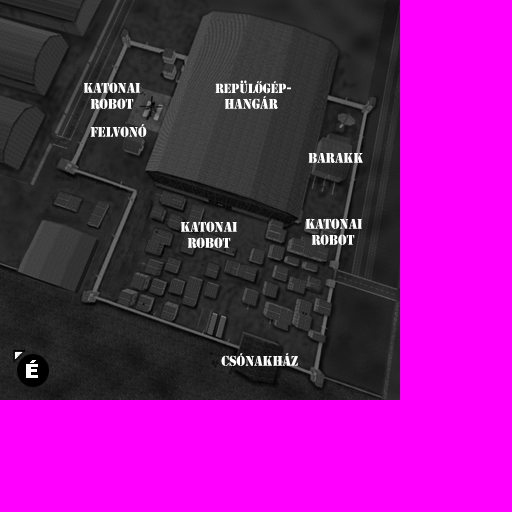
<style>
.page{position:relative;width:512px;height:512px;background:#ff00ff}
.page>*{position:absolute;margin:0}
.t1{font:13.2px "StencilStd";letter-spacing:-0.005em;color:#ffffff;scale:0.92 1}
.t2{font:12.4px "StencilStd";letter-spacing:-0.005em;color:#ffffff;scale:0.92 1}
</style>
<div class="page">
<p class="t1" style="left:84px;top:82px;width:56px;height:11px">KATONAI</p>
<p class="t2" style="left:215px;top:80px;width:76px;height:14px">REPÜLŐGÉP-</p>
<p class="t1" style="left:90px;top:98px;width:44px;height:11px">ROBOT</p>
<p class="t1" style="left:225px;top:96px;width:53px;height:13px">HANGÁR</p>
<p class="t1" style="left:90px;top:124px;width:57px;height:13px">FELVONÓ</p>
<p class="t1" style="left:308px;top:153px;width:55px;height:10px">BARAKK</p>
<p class="t1" style="left:181px;top:221px;width:56px;height:11px">KATONAI</p>
<p class="t1" style="left:306px;top:218px;width:56px;height:11px">KATONAI</p>
<p class="t1" style="left:187px;top:237px;width:44px;height:11px">ROBOT</p>
<p class="t1" style="left:311px;top:234px;width:44px;height:11px">ROBOT</p>
<p class="t1" style="left:221px;top:353px;width:77px;height:13px">CSÓNAKHÁZ</p>
</div>
